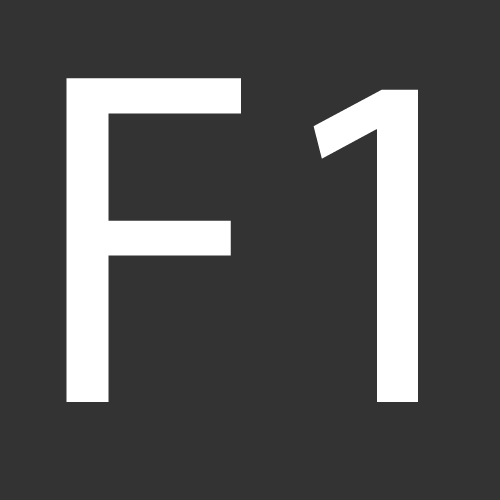
<style>
.page{position:relative;width:500px;height:500px;background:#333333}
.page>*{position:absolute;margin:0}
.t1{font:480.2px "MyriadPro-Regular";color:#ffffff}
</style>
<div class="page">
<p class="t1" style="left:66px;top:78px;width:352px;height:324px">F1</p>
</div>
